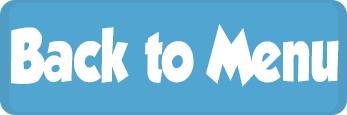
<style>
.page{position:relative;width:347px;height:115px;background:#51a5d1}
.page>*{position:absolute;margin:0}
.t1{font:67.3px "GROBOLD";color:#ffffff;scale:0.74 1}
</style>
<div class="page">
<p class="t1" style="left:11px;top:23px;width:328px;height:64px">Back to Menu</p>
</div>
